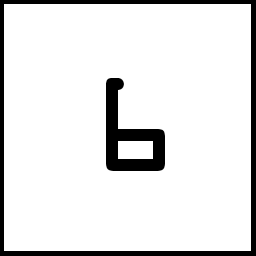
<style>
.page{position:relative;width:256px;height:256px;background:#ffffff}
.page>*{position:absolute;margin:0}
.t1{font:120px "OCRAStd";color:#000000}
</style>
<div class="page">
<p class="t1" style="left:106px;top:78px;width:59px;height:93px">6</p>
</div>
